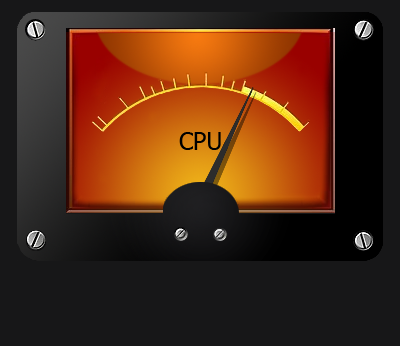
<style>
.page{position:relative;width:400px;height:346px;background:#171718}
.page>*{position:absolute;margin:0}
.t1{font:24px "Tahoma";color:#000000}
</style>
<div class="page">
<p class="t1" style="left:179px;top:132px;width:42px;height:18px">CPU</p>
</div>
